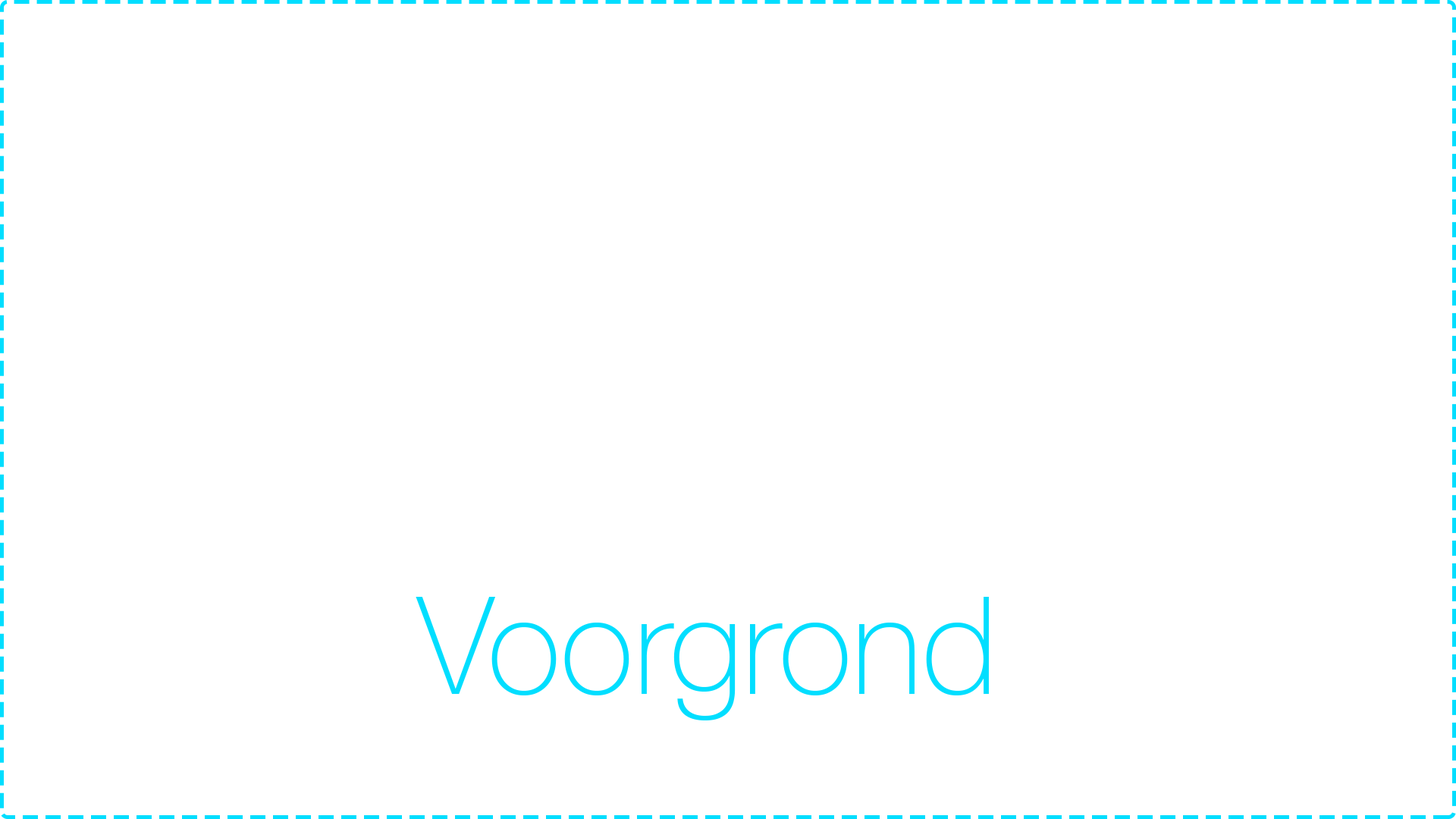
<style>
.page{position:relative;width:1456px;height:819px;background:#ffffff}
.page>*{position:absolute;margin:0}
.t1{font:135.7px "HelveticaNeue-Thin";color:#01deff}
</style>
<div class="page">
<p class="t1" style="left:416px;top:597px;width:573px;height:123px">Voorgrond</p>
</div>
